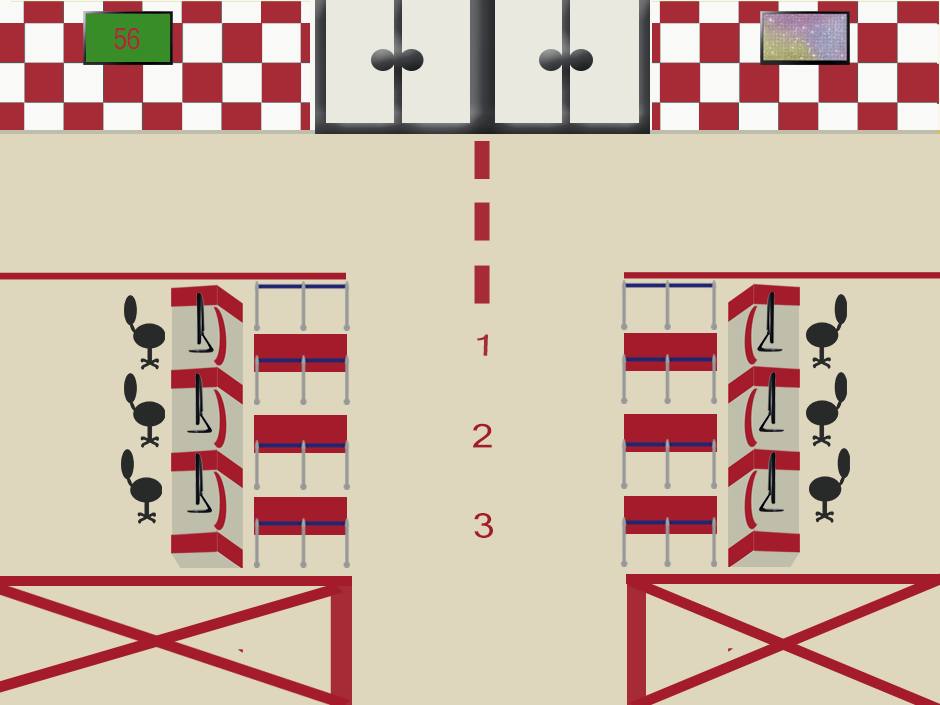
<style>
.page{position:relative;width:940px;height:705px;background:#ded7bd}
.page>*{position:absolute;margin:0}
.t1{font:29.7px "MicrosoftSansSerif";letter-spacing:-0.025em;color:#a62b37;scale:0.84 1}
.t2{font:29.2px "MicrosoftSansSerif";letter-spacing:-0.025em;color:#a62b37;scale:1.36 1}
.t3{font:32.4px "MicrosoftSansSerif";letter-spacing:-0.025em;color:#a41c2b;scale:1.23 1}
.t4{font:33.5px "MicrosoftSansSerif";letter-spacing:-0.025em;color:#a41c2b;scale:1.19 1}
</style>
<div class="page">
<p class="t1" style="left:114px;top:27px;width:26px;height:23px">56</p>
<p class="t2" style="left:477px;top:334px;width:11px;height:22px">1</p>
<p class="t3" style="left:473px;top:423px;width:19px;height:25px">2</p>
<p class="t4" style="left:474px;top:513px;width:19px;height:25px">3</p>
</div>
